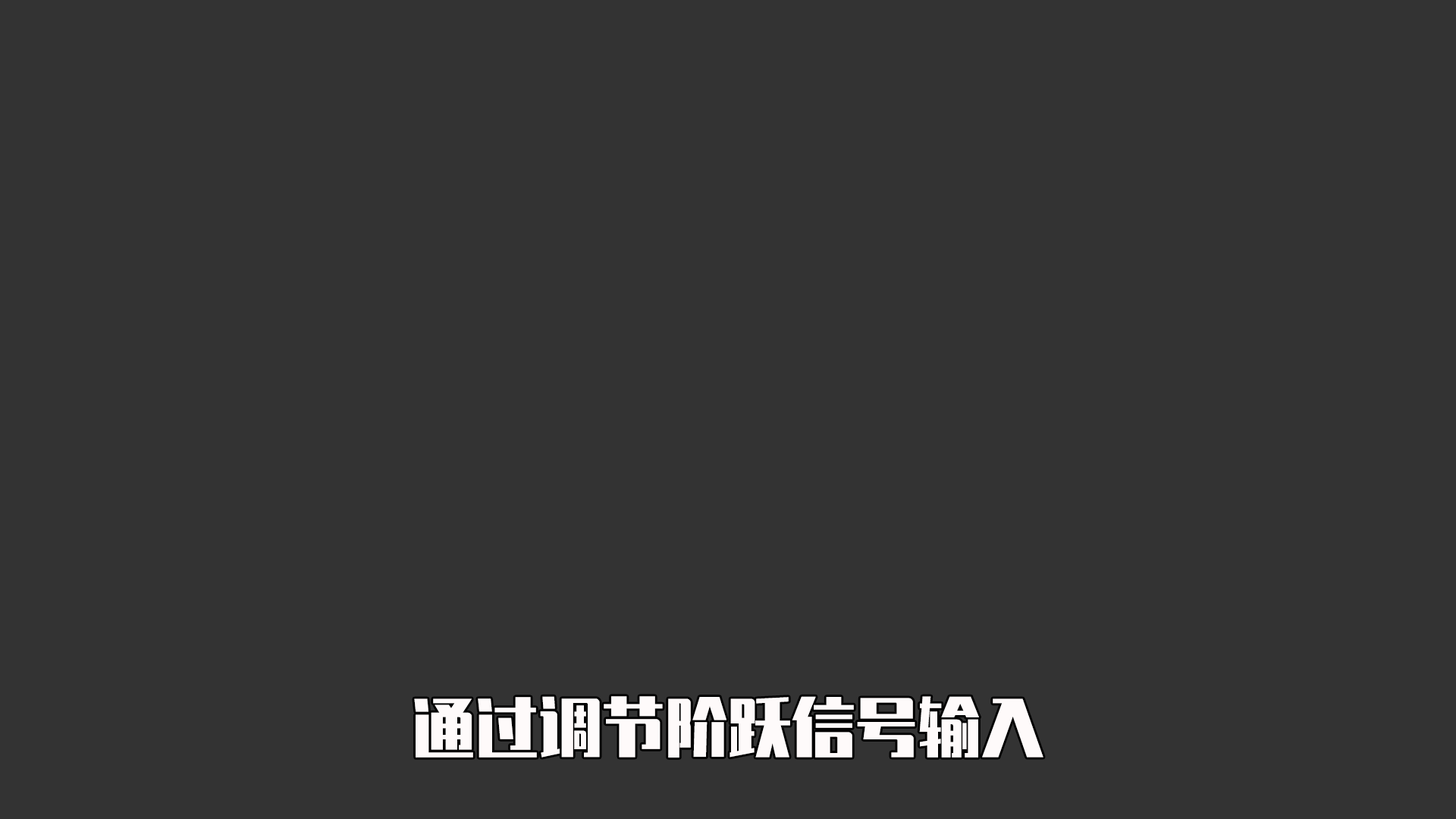
<style>
.page{position:relative;width:1456px;height:819px;background:#333333}
.page>*{position:absolute;margin:0}
.t1{font:63.2px "ZhenyanGB-Regular";color:#fefafa}
</style>
<div class="page">
<p class="t1" style="left:414px;top:696px;width:629px;height:62px">通过调节阶跃信号输入</p>
</div>
